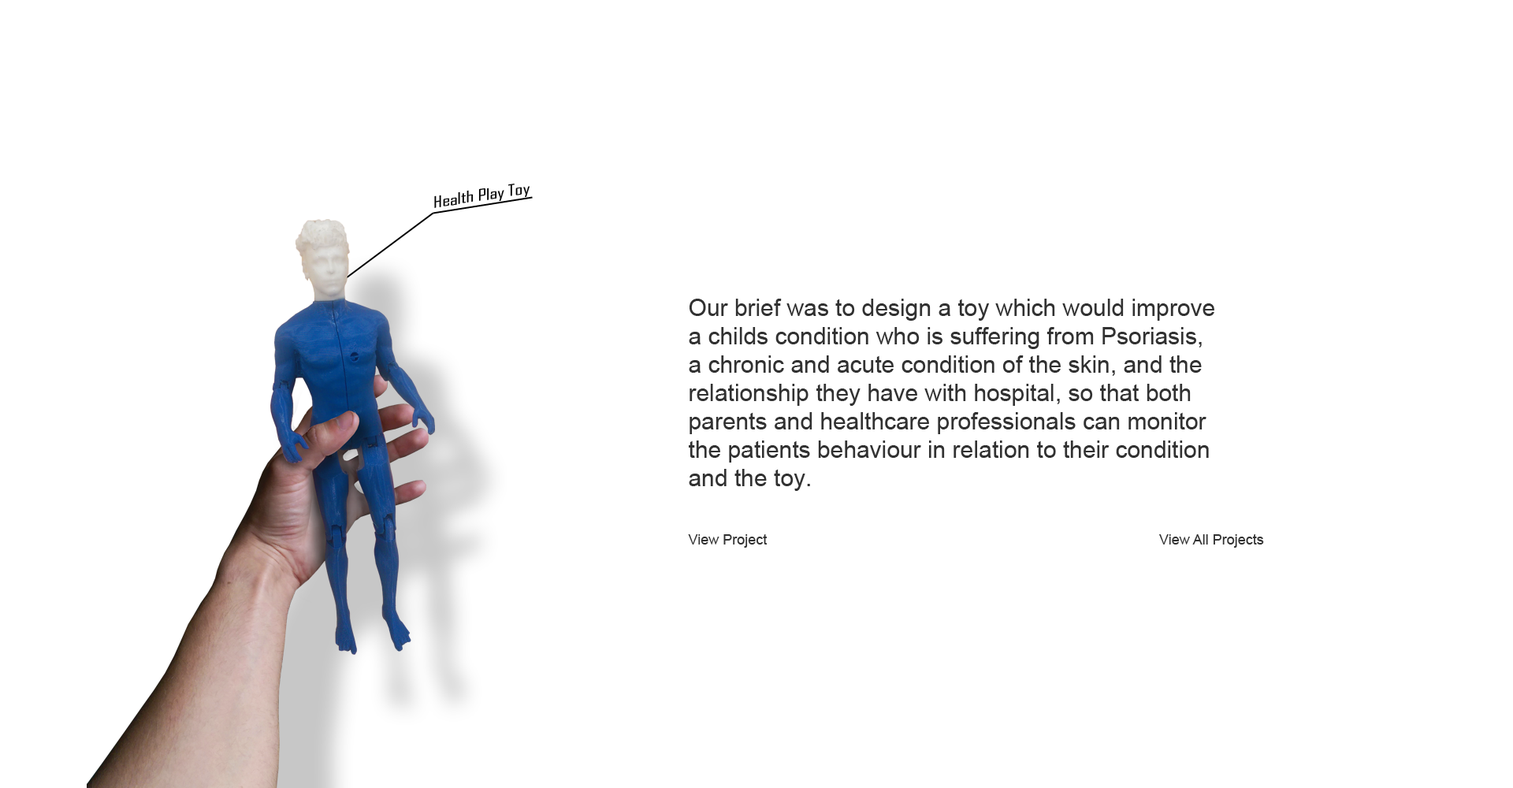
<style>
.page{position:relative;width:1513px;height:788px;background:#ffffff}
.page>*{position:absolute;margin:0}
.t1{font:23.6px "ArialMT";color:#313131}
.t2{font:14.2px "ArialMT";color:#313131}
</style>
<div class="page">
<p class="t1" style="left:689px;top:299px;width:525px;height:192px">Our brief was to design a toy which would improve a childs condition who is suffering from Psoriasis, a chronic and acute condition of the skin, and the relationship they have with hospital, so that both parents and healthcare professionals can monitor the patients behaviour in relation to their condition and the toy.</p>
<p class="t2" style="left:688px;top:534px;width:80px;height:14px">View Project</p>
<p class="t2" style="left:1159px;top:534px;width:105px;height:14px">View All Projects</p>
</div>
